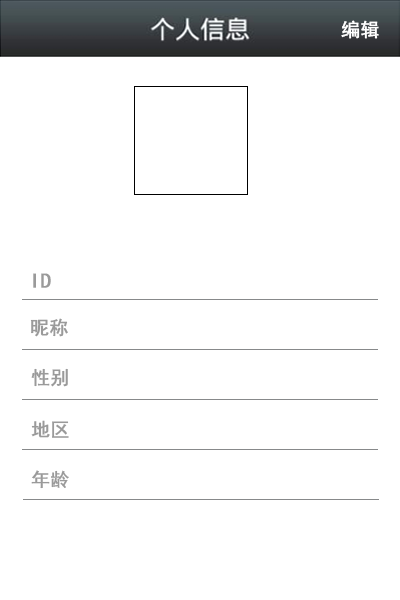
<style>
.page{position:relative;width:400px;height:600px;background:#ffffff}
.page>*{position:absolute;margin:0}
.t1{font:18.7px "SimHei";color:#ffffff;font-weight:bold}
.t2{font:21.3px "SimHei";color:#9a9a9a;font-weight:bold}
.t3{font:18.7px "SimHei";color:#9a9a9a;font-weight:bold}
</style>
<div class="page">
<p class="t1" style="left:341px;top:20px;width:38px;height:19px">编辑</p>
<p class="t2" style="left:33px;top:273px;width:18px;height:15px">ID</p>
<p class="t3" style="left:30px;top:318px;width:38px;height:19px">昵称</p>
<p class="t3" style="left:31px;top:368px;width:37px;height:19px">性别</p>
<p class="t3" style="left:31px;top:420px;width:38px;height:18px">地区</p>
<p class="t3" style="left:31px;top:470px;width:38px;height:19px">年龄</p>
</div>
